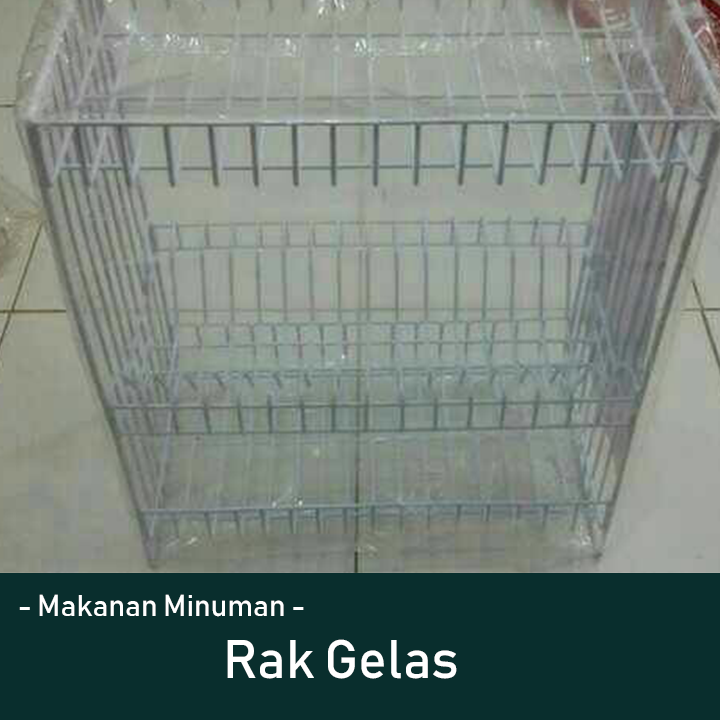
<style>
.page{position:relative;width:720px;height:720px}
.page>*{position:absolute;margin:0}
.t1{font:30px "Bahnschrift";color:#ffffff}
.t2{font:53.6px "Bahnschrift";color:#ffffff}
</style>
<div class="page">
<p class="t1" style="left:19px;top:594px;width:285px;height:23px">- Makanan Minuman -</p>
<p class="t2" style="left:227px;top:639px;width:230px;height:40px">Rak Gelas</p>
</div>
